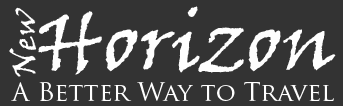
<style>
.page{position:relative;width:343px;height:106px;background:#333333}
.page>*{position:absolute;margin:0}
.t1{font:83.3px "VinerHandITC";color:#fefefe}
.t2{font:33.3px "VinerHandITC";color:#ffffff}
.t3{font:25px "TrajanPro-Regular";color:#ffffff}
</style>
<div class="page">
<p class="t1" style="left:38px;top:6px;width:298px;height:69px">Horizon</p>
<p class="t2" style="left:9px;top:7px;width:28px;height:70px;rotate:-90deg">New</p>
<p class="t3" style="left:11px;top:82px;width:323px;height:19px">A Better Way to Travel</p>
</div>
